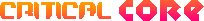
<style>
.page{position:relative;width:204px;height:21px;background:#ffffff}
.page>*{position:absolute;margin:0}
.t1{font:16.7px "BionicKidSimple";letter-spacing:0.025em;scale:0.66 1}
.t2{font:28.4px "SudburyBasin-Regular";letter-spacing:0.025em}
</style>
<div class="page">
<p class="t1" style="left:0px;top:2px;width:111px;height:17px">CRITICAL</p>
<p class="t2" style="left:119px;top:0px;width:85px;height:21px">CORE</p>
</div>
